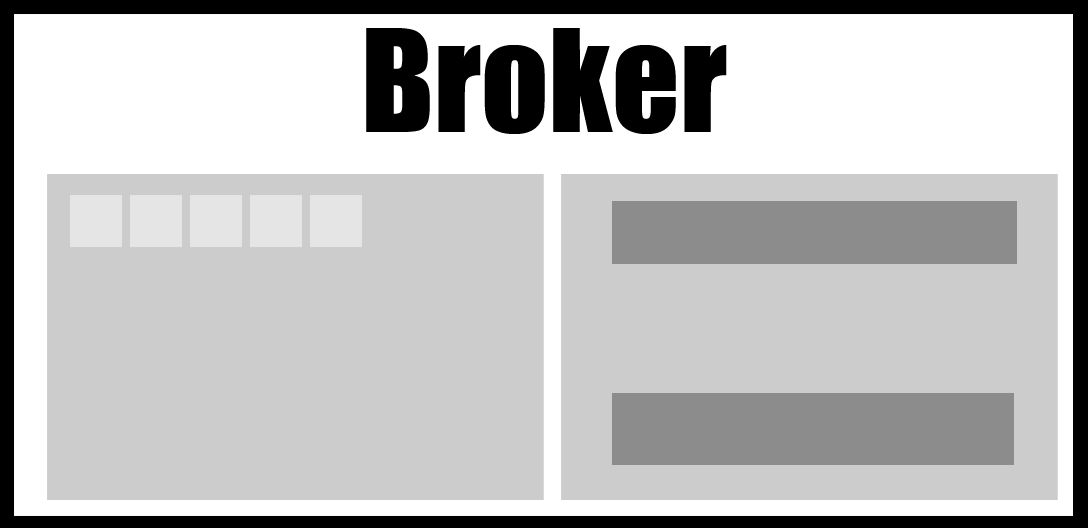
<style>
.page{position:relative;width:1088px;height:528px;background:#cccccc}
.page>*{position:absolute;margin:0}
.t1{font:132.1px "Impact";color:#000000}
</style>
<div class="page">
<p class="t1" style="left:366px;top:28px;width:361px;height:106px">Broker</p>
</div>
